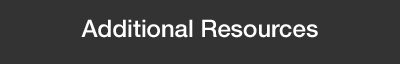
<style>
.page{position:relative;width:400px;height:64px;background:#333333}
.page>*{position:absolute;margin:0}
.t1{font:24px "HelveticaNeueLTCom-Md";color:#ffffff}
</style>
<div class="page">
<p class="t1" style="left:81px;top:19px;width:237px;height:19px">Additional Resources</p>
</div>
